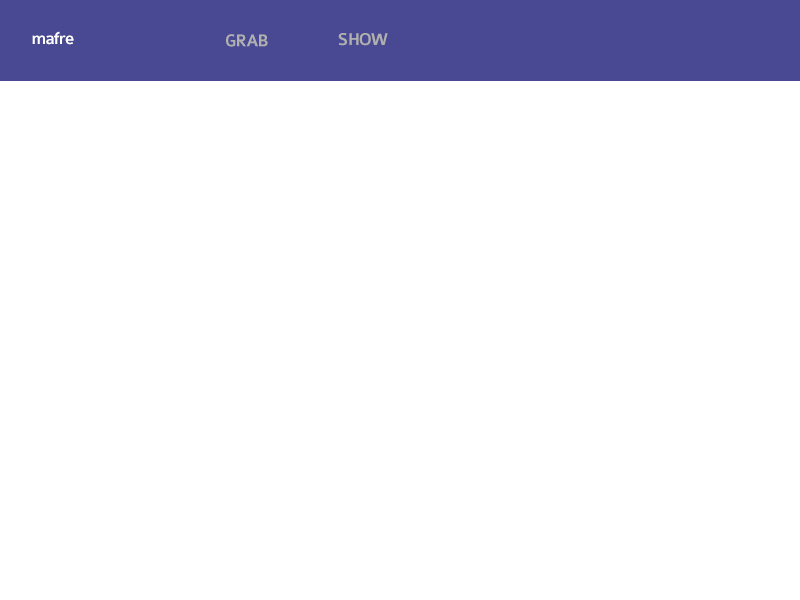
<style>
.page{position:relative;width:800px;height:600px;background:#ffffff}
.page>*{position:absolute;margin:0}
.t1{font:18px "Colaborate-Medium";letter-spacing:-0.05em;color:#ffffff}
.t2{font:18px "Colaborate-Medium";letter-spacing:-0.05em;color:#b0b0b0}
</style>
<div class="page">
<p class="t1" style="left:32px;top:31px;width:42px;height:14px">mafre</p>
<p class="t2" style="left:226px;top:34px;width:42px;height:13px">GRAB</p>
<p class="t2" style="left:338px;top:33px;width:50px;height:13px">SHOW</p>
</div>
